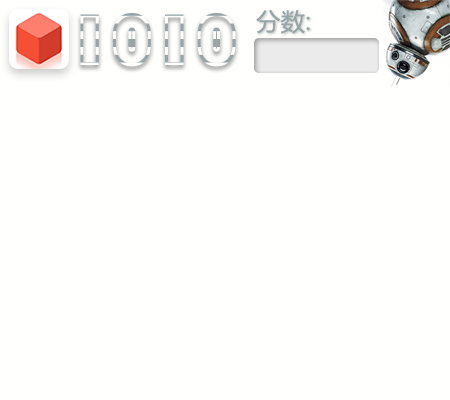
<style>
.page{position:relative;width:450px;height:400px;background:#fffffd}
.page>*{position:absolute;margin:0}
.t1{font:72px "STCaiyun";letter-spacing:0.02em}
.t2{font:24px "MicrosoftYaHei";letter-spacing:0.02em;color:#96a5a8}
</style>
<div class="page">
<p class="t1" style="left:80px;top:13px;width:156px;height:54px">1010</p>
<p class="t2" style="left:256px;top:9px;width:54px;height:25px">分数:</p>
</div>
